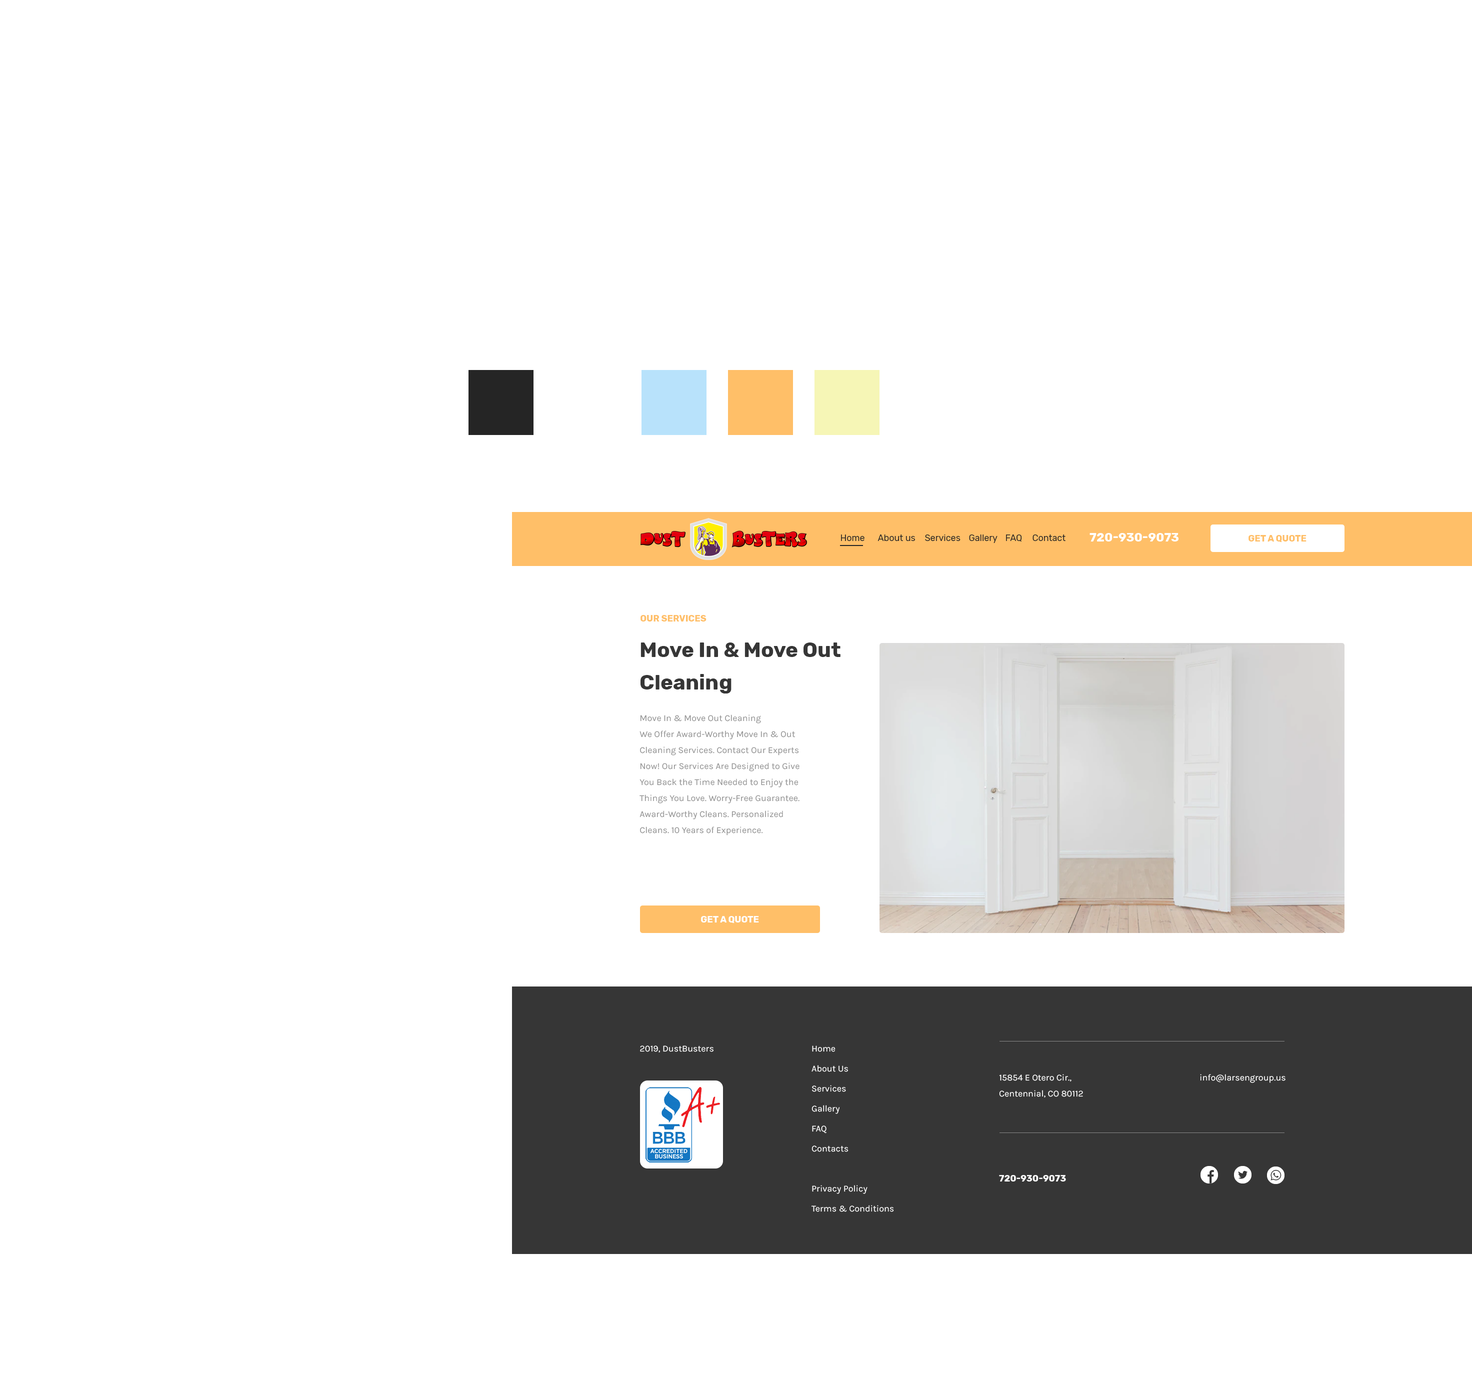
<style>
.page{position:relative;width:1472px;height:1388px;background:#ffffff}
.page>*{position:absolute;margin:0}
.t1{font:12px "Rubik-Bold";color:#ffffff;text-transform:uppercase}
.t2{font:9px "Rubik-Regular";color:#252525}
.t3{font:9px "Rubik-Bold";color:#ffbf68;text-transform:uppercase}
.t4{font:21px/32.5px "Rubik-Bold";color:#363636}
.t5{font:9px/16px "Karla-Regular";color:#909090}
.t6{font:9px "Rubik-Bold";color:#ffffff;text-transform:uppercase}
.t7{font:9px "Karla-Regular";color:#ffffff}
.t8{font:9px/20px "Karla-Regular";color:#ffffff}
.t9{font:9px/16.1px "Karla-Regular";color:#ffffff}
</style>
<div class="page">
<p class="t1" style="left:1090px;top:533px;width:88px;height:9px">720-930-9073</p>
<p class="t2" style="left:841px;top:534px;width:23px;height:7px">Home</p>
<p class="t2" style="left:878px;top:534px;width:37px;height:7px">About us</p>
<p class="t2" style="left:925px;top:534px;width:35px;height:7px">Services</p>
<p class="t2" style="left:969px;top:534px;width:29px;height:9px">Gallery</p>
<p class="t2" style="left:1006px;top:534px;width:16px;height:8px">FAQ</p>
<p class="t2" style="left:1032px;top:534px;width:34px;height:7px">Contact</p>
<p class="t3" style="left:1248px;top:535px;width:58px;height:7px">Get a Quote</p>
<p class="t3" style="left:640px;top:615px;width:66px;height:7px">Our services</p>
<p class="t4" style="left:640px;top:642px;width:200px;height:52px">Move In &amp; Move Out <br>Cleaning</p>
<p class="t5" style="left:640px;top:714px;width:160px;height:122px">Move In &amp; Move Out Cleaning<br>We Offer Award-Worthy Move In &amp; Out Cleaning Services. Contact Our Experts Now! Our Services Are Designed to Give You Back the Time Needed to Enjoy the Things You Love. Worry-Free Guarantee. Award-Worthy Cleans. Personalized Cleans. 10 Years of Experience.</p>
<p class="t6" style="left:701px;top:916px;width:58px;height:7px">Get a Quote</p>
<p class="t7" style="left:640px;top:1046px;width:74px;height:6px">© 2019, DustBusters</p>
<p class="t8" style="left:811px;top:1046px;width:83px;height:166px">Home<br>About Us<br>Services<br>Gallery<br>FAQ<br>Contacts<br><br>Privacy Policy<br>Terms &amp; Conditions</p>
<p class="t9" style="left:999px;top:1074px;width:84px;height:24px">15854 E Otero Cir.,<br>Centennial, CO 80112</p>
<p class="t7" style="left:1200px;top:1074px;width:86px;height:9px">info@larsengroup.us</p>
<p class="t6" style="left:999px;top:1175px;width:67px;height:7px">720-930-9073</p>
</div>
